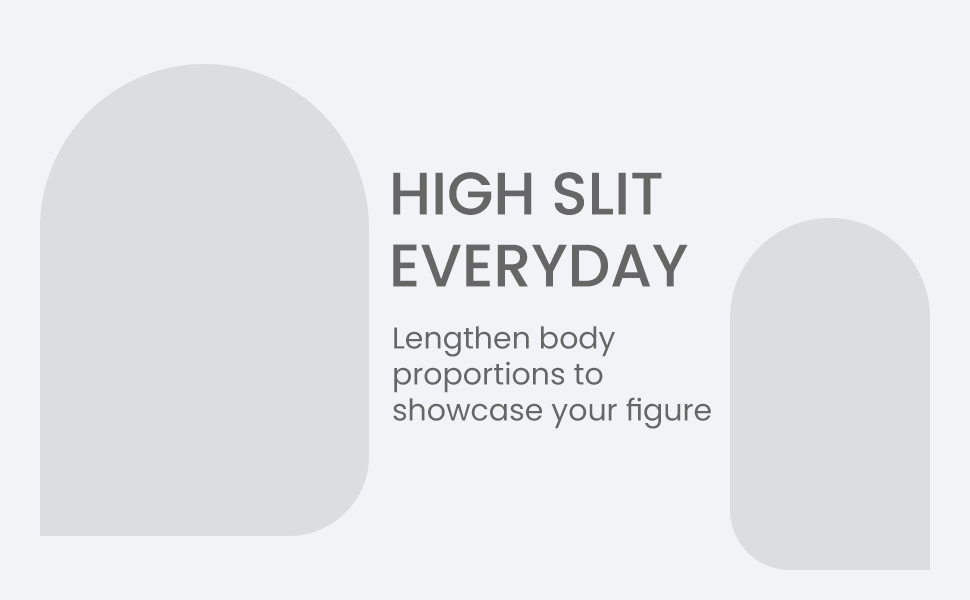
<style>
.page{position:relative;width:970px;height:600px;background:#f2f3f6}
.page>*{position:absolute;margin:0}
.t1{font:60px "Poppins-Medium";color:#666666}
.t2{font:30px "Poppins-Regular";color:#666666}
</style>
<div class="page">
<p class="t1" style="left:393px;top:172px;width:295px;height:115px">HIGH SLIT<br>EVERYDAY</p>
<p class="t2" style="left:393px;top:326px;width:318px;height:103px">Lengthen body <br>proportions to<br>showcase your figure</p>
</div>
